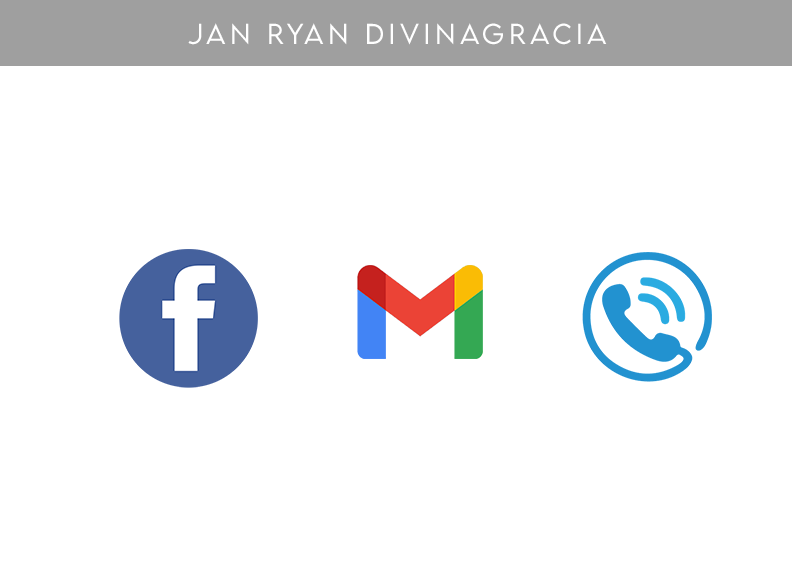
<style>
.page{position:relative;width:792px;height:576px;background:#ffffff}
.page>*{position:absolute;margin:0}
.t1{font:25.6px "LEMONMILK-Light";letter-spacing:0.18em;color:#ffffff}
</style>
<div class="page">
<p class="t1" style="left:188px;top:23px;width:419px;height:22px">Jan Ryan Divinagracia</p>
</div>
